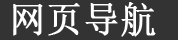
<style>
.page{position:relative;width:178px;height:40px;background:#333333}
.page>*{position:absolute;margin:0}
.t1{font:36px "SimSun";color:#ffffff;font-weight:bold}
</style>
<div class="page">
<p class="t1" style="left:13px;top:2px;width:143px;height:35px">网页导航</p>
</div>
